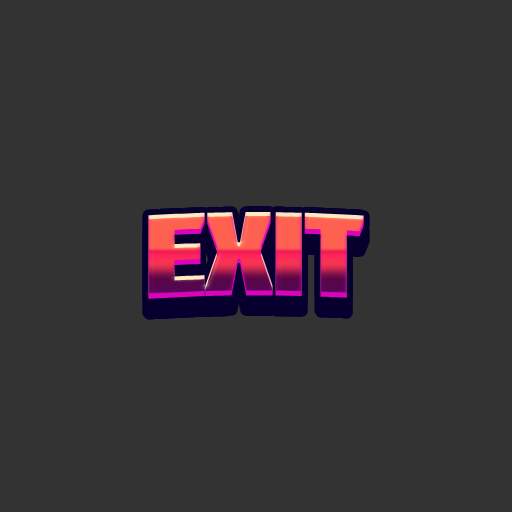
<style>
.page{position:relative;width:512px;height:512px;background:#333333}
.page>*{position:absolute;margin:0}
.t1{font:119px "Molot";letter-spacing:-0.025em}
</style>
<div class="page">
<p class="t1" style="left:148px;top:212px;width:216px;height:87px">exit</p>
</div>
